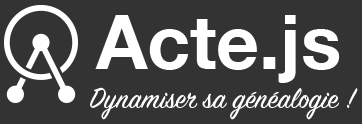
<style>
.page{position:relative;width:362px;height:124px;background:#333333}
.page>*{position:absolute;margin:0}
.t1{font:75.4px "HelveticaNeue-Bold";color:#ffffff}
.t2{font:31.8px "SignPainter-HouseScript";color:#ffffff}
</style>
<div class="page">
<p class="t1" style="left:95px;top:15px;width:245px;height:68px">Acte.js</p>
<p class="t2" style="left:90px;top:87px;width:268px;height:33px">Dynamiser sa généalogie !</p>
</div>
